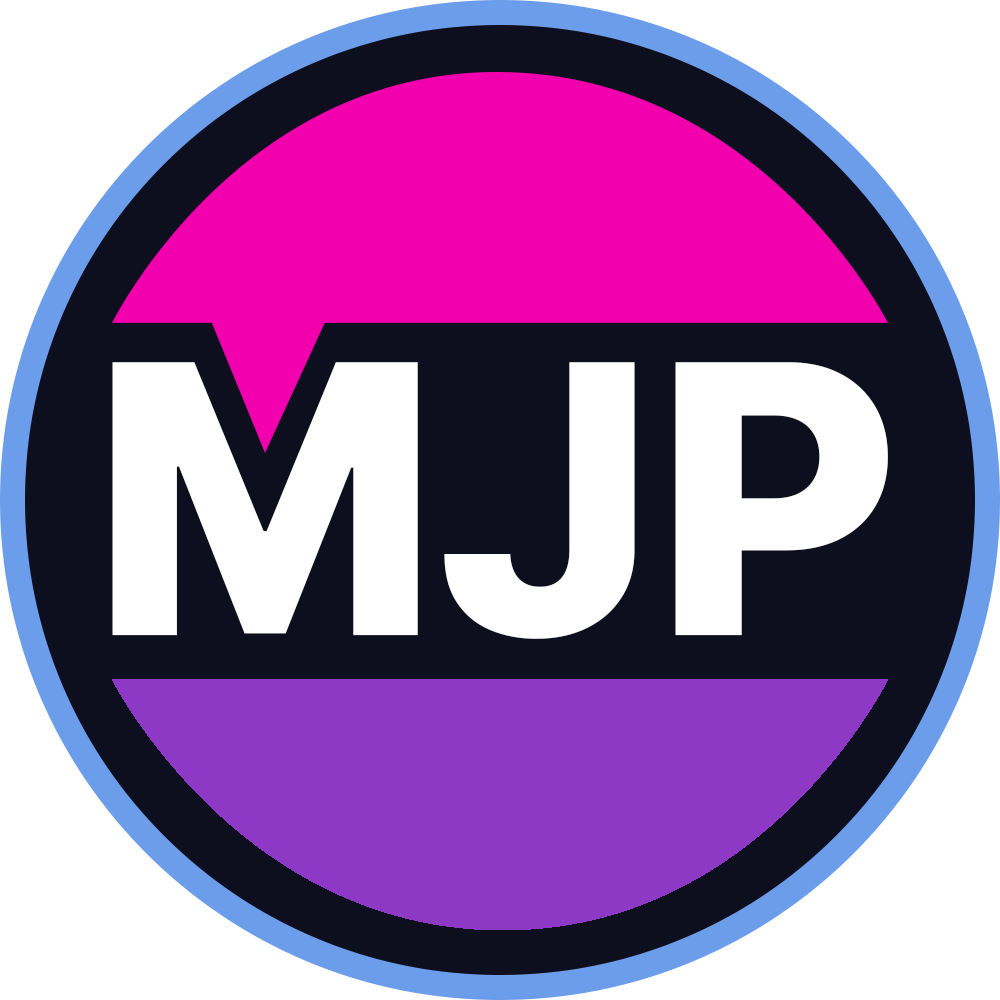
<style>
.page{position:relative;width:1000px;height:1000px;background:#ffffff}
.page>*{position:absolute;margin:0}
.t1{font:375px "Inter-ExtraBold";color:#ffffff}
</style>
<div class="page">
<p class="t1" style="left:112px;top:362px;width:776px;height:277px">MJP</p>
</div>
